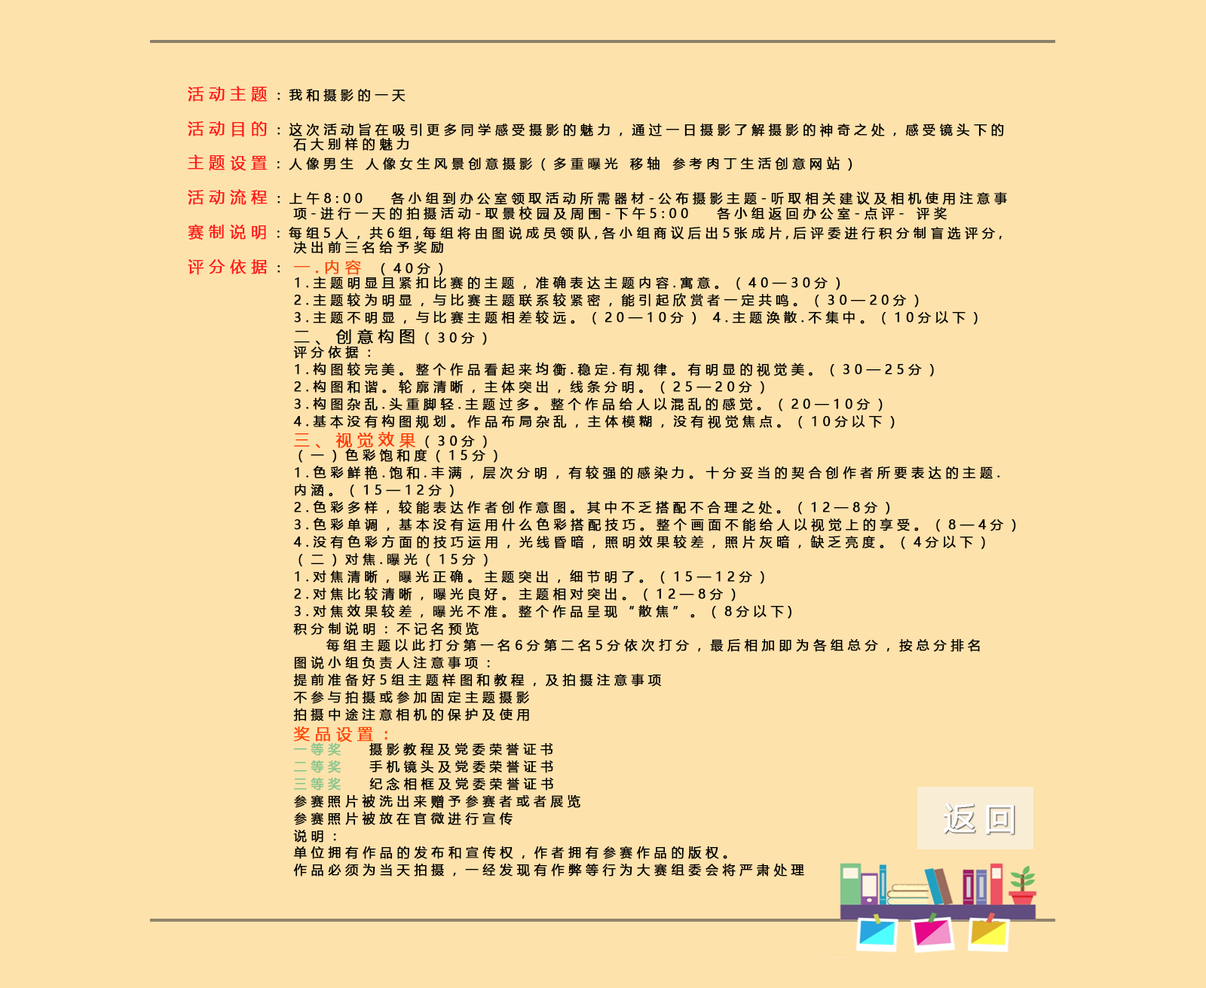
<style>
.page{position:relative;width:1206px;height:988px;background:#fde2ac}
.page>*{position:absolute;margin:0}
.t1{font:12.6px/17.3px "MicrosoftYaHei";letter-spacing:0.288em;color:#000000;text-transform:uppercase;font-weight:bold}
.t2{font:15.7px/17.3px "MicrosoftYaHei";letter-spacing:0.288em;color:#ff1a1a;text-transform:uppercase;font-weight:bold}
.t3{font:15.7px/17.3px "MicrosoftYaHei";letter-spacing:0.288em;color:#f65109;text-transform:uppercase;font-weight:bold}
.t4{font:15.7px/17.3px "MicrosoftYaHei";letter-spacing:0.288em;color:#000000;text-transform:uppercase;font-weight:bold}
.t5{font:15.7px/17.3px "MicrosoftYaHei";letter-spacing:0.288em;color:#fd3c00;text-transform:uppercase;font-weight:bold}
.t6{font:15.7px/17.3px "MicrosoftYaHei";letter-spacing:0.288em;color:#ff4800;text-transform:uppercase;font-weight:bold}
.t7{font:12.6px/17.3px "MicrosoftYaHei";letter-spacing:0.288em;color:#80c58c;text-transform:uppercase;font-weight:bold}
.t8{font:31.4px "MicrosoftYaHei";letter-spacing:0.288em;color:#ffffff;text-transform:uppercase;font-weight:bold}
</style>
<div class="page">
<p class="t1" style="left:188px;top:86px;width:819px;height:189px"><span class="t2">活动主题</span>：我和摄影的一天<br><br><span class="t2">活动目的</span>：这次活动旨在吸引更多同学感受摄影的魅力，通过一日摄影了解摄影的神奇之处，感受镜头下的<br>             石大别样的魅力<br><span class="t2">主题设置</span>：人像男生 人像女生风景创意摄影（多重曝光 移轴 参考肉丁生活创意网站）<br><br><span class="t2">活动流程</span>：上午8:00   各小组到办公室领取活动所需器材-公布摄影主题-听取相关建议及相机使用注意事<br>             项-进行一天的拍摄活动-取景校园及周围-下午5:00   各小组返回办公室-点评- 评奖<br><span class="t2">赛制说明</span>：每组5人，共6组,每组将由图说成员领队,各小组商议后出5张成片,后评委进行积分制盲选评分,<br>             决出前三名给予奖励<br><span class="t2">评分依据</span>：</p>
<p class="t1" style="left:293px;top:260px;width:723px;height:617px"><span class="t3">一.内容 </span>（40分）<br>1.主题明显且紧扣比赛的主题，准确表达主题内容.寓意。（40—30分）<br>2.主题较为明显，与比赛主题联系较紧密，能引起欣赏者一定共鸣。（30—20分）<br>3.主题不明显，与比赛主题相差较远。（20—10分） 4.主题涣散.不集中。（10分以下）<br><span class="t4">二、创意构图</span>（30分）<br>评分依据：<br>1.构图较完美。整个作品看起来均衡.稳定.有规律。有明显的视觉美。（30—25分）<br>2.构图和谐。轮廓清晰，主体突出，线条分明。（25—20分）<br>3.构图杂乱.头重脚轻.主题过多。整个作品给人以混乱的感觉。（20—10分）<br>4.基本没有构图规划。作品布局杂乱，主体模糊，没有视觉焦点。（10分以下）<br><span class="t5">三、视觉效果</span>（30分）<br>（一）色彩饱和度（15分）<br>1.色彩鲜艳.饱和.丰满，层次分明，有较强的感染力。十分妥当的契合创作者所要表达的主题.<br>内涵。（15—12分）<br>2.色彩多样，较能表达作者创作意图。其中不乏搭配不合理之处。（12—8分）<br>3.色彩单调，基本没有运用什么色彩搭配技巧。整个画面不能给人以视觉上的享受。（8—4分）<br>4.没有色彩方面的技巧运用，光线昏暗，照明效果较差，照片灰暗，缺乏亮度。（4分以下）<br>（二）对焦.曝光（15分）<br>1.对焦清晰，曝光正确。主题突出，细节明了。（15—12分）<br>2.对焦比较清晰，曝光良好。主题相对突出。（12—8分）<br>3.对焦效果较差，曝光不准。整个作品呈现“散焦”。（8分以下)<br>积分制说明：不记名预览<br>    每组主题以此打分第一名6分第二名5分依次打分，最后相加即为各组总分，按总分排名<br>图说小组负责人注意事项：<br>提前准备好5组主题样图和教程，及拍摄注意事项<br>不参与拍摄或参加固定主题摄影<br>拍摄中途注意相机的保护及使用<br><span class="t6">奖品设置：<br></span><span class="t7">一等奖</span>   摄影教程及党委荣誉证书<br><span class="t7">二等奖</span>   手机镜头及党委荣誉证书<br><span class="t7">三等奖</span>   纪念相框及党委荣誉证书<br>参赛照片被洗出来赠予参赛者或者展览<br>参赛照片被放在官微进行宣传 <br>说明：         <br>单位拥有作品的发布和宣传权，作者拥有参赛作品的版权。<br>作品必须为当天拍摄，一经发现有作弊等行为大赛组委会将严肃处理</p>
<p class="t8" style="left:943px;top:804px;width:72px;height:31px">返回</p>
</div>
